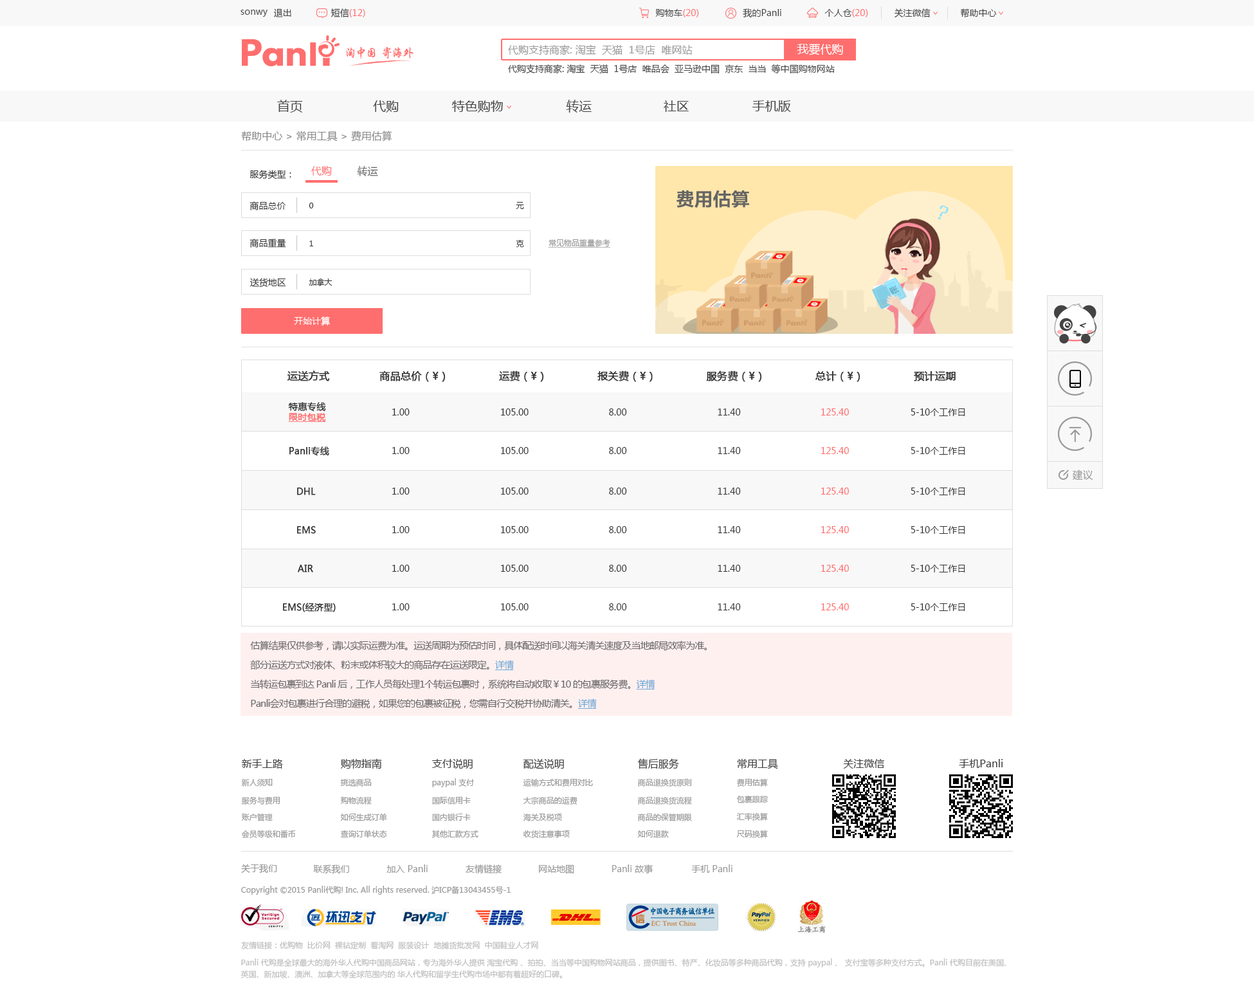
<style>
.page{position:relative;width:1254px;height:1004px;background:#ffffff}
.page>*{position:absolute;margin:0}
.t1{font:9px "MicrosoftYaHei";color:#444444}
.t2{font:9px "MicrosoftYaHei";color:#ff6e6e}
.t3{font:10.3px "MicrosoftYaHei";color:#999999}
.t4{font:11.6px "MicrosoftYaHei";color:#ffffff}
.t5{font:12.9px "MicrosoftYaHei";color:#444444}
.t6{font:10.3px "MicrosoftYaHei";color:#888888}
.t7{font:9px "MicrosoftYaHei";color:#333333}
.t8{font:10.3px "MicrosoftYaHei";color:#ff6e6e}
.t9{font:10.3px "MicrosoftYaHei";color:#666666}
.t10{font:18px "FZLTZHK--GBK1-0";color:#656565;font-weight:bold}
.t11{font:7.7px "MicrosoftYaHei";color:#333333}
.t12{font:7.7px "MicrosoftYaHei";color:#999999;text-decoration:underline}
.t13{font:9px "MicrosoftYaHei";color:#ffffff}
.t14{font:10.3px "MicrosoftYaHei";color:#333333;font-weight:bold}
.t15{font:9px/10.3px "MicrosoftYaHei";color:#333333;font-weight:bold}
.t16{font:9px/10.3px "MicrosoftYaHei";color:#ff6e6e;font-weight:bold;text-decoration:underline}
.t17{font:9px "MicrosoftYaHei";color:#333333;font-weight:bold}
.t18{font:9.6px/19.3px "MicrosoftYaHei";letter-spacing:-0.06em;color:#666666}
.t19{font:9.6px/19.3px "MicrosoftYaHei";letter-spacing:-0.06em;color:#68a6d4;text-decoration:underline}
</style>
<div class="page">
<p class="t1" style="left:240px;top:10px;width:27px;height:7px">sonwy</p>
<p class="t1" style="left:273px;top:8px;width:18px;height:9px">退出</p>
<p class="t2" style="left:330px;top:8px;width:35px;height:9px"><span class="t1">短信</span>(12)</p>
<p class="t2" style="left:655px;top:9px;width:44px;height:8px"><span class="t1">购物车</span>(20)</p>
<p class="t1" style="left:742px;top:8px;width:39px;height:10px">我的Panli</p>
<p class="t2" style="left:824px;top:9px;width:44px;height:8px"><span class="t1">个人仓</span>(20)</p>
<p class="t1" style="left:894px;top:8px;width:36px;height:9px">关注微信</p>
<p class="t1" style="left:960px;top:8px;width:36px;height:10px">帮助中心</p>
<p class="t3" style="left:508px;top:44px;width:184px;height:11px">代购支持商家: 淘宝  天猫  1号店  唯网站</p>
<p class="t4" style="left:797px;top:44px;width:46px;height:11px">我要代购</p>
<p class="t1" style="left:508px;top:64px;width:326px;height:10px">代购支持商家: 淘宝  天猫  1号店  唯品会  亚马逊中国  京东  当当  等中国购物网站</p>
<p class="t5" style="left:277px;top:100px;width:26px;height:13px">首页</p>
<p class="t5" style="left:373px;top:100px;width:26px;height:13px">代购</p>
<p class="t5" style="left:451px;top:100px;width:52px;height:13px">特色购物</p>
<p class="t5" style="left:566px;top:100px;width:25px;height:13px">转运</p>
<p class="t5" style="left:663px;top:100px;width:25px;height:12px">社区</p>
<p class="t5" style="left:752px;top:100px;width:39px;height:12px">手机版</p>
<p class="t6" style="left:241px;top:130px;width:151px;height:11px">帮助中心 &gt; 常用工具 &gt; 费用估算</p>
<p class="t7" style="left:249px;top:170px;width:42px;height:9px">服务类型：</p>
<p class="t8" style="left:311px;top:166px;width:21px;height:10px">代购</p>
<p class="t9" style="left:357px;top:166px;width:21px;height:10px">转运</p>
<p class="t10" style="left:676px;top:190px;width:73px;height:18px">费用估算</p>
<p class="t7" style="left:249px;top:201px;width:37px;height:9px">商品总价</p>
<p class="t11" style="left:309px;top:203px;width:5px;height:5px">0</p>
<p class="t11" style="left:516px;top:202px;width:8px;height:7px">元</p>
<p class="t7" style="left:249px;top:239px;width:37px;height:9px">商品重量</p>
<p class="t11" style="left:309px;top:240px;width:4px;height:6px">1</p>
<p class="t11" style="left:516px;top:239px;width:8px;height:9px">克</p>
<p class="t12" style="left:548px;top:239px;width:62px;height:9px">常见物品重量参考</p>
<p class="t7" style="left:249px;top:278px;width:37px;height:9px">送货地区</p>
<p class="t11" style="left:309px;top:278px;width:23px;height:8px">加拿大</p>
<p class="t13" style="left:294px;top:316px;width:36px;height:10px">开始计算</p>
<p class="t14" style="left:287px;top:370px;width:668px;height:12px">运送方式               商品总价（¥）               运费（¥）               报关费（¥）               服务费（¥）               总计（¥）               预计运期</p>
<p class="t15" style="left:288px;top:402px;width:38px;height:20px">特惠专线<br><span class="t16">限时包税</span></p>
<p class="t7" style="left:392px;top:408px;width:573px;height:8px">1.00                                  105.00                              8.00                                  11.40                              <span class="t2">125.40</span>                       5-10个工作日</p>
<p class="t17" style="left:289px;top:446px;width:40px;height:10px">Panli专线</p>
<p class="t7" style="left:392px;top:447px;width:573px;height:8px">1.00                                  105.00                              8.00                                  11.40                              <span class="t2">125.40  </span>                     5-10个工作日</p>
<p class="t3" style="left:1072px;top:469px;width:21px;height:11px">建议</p>
<p class="t17" style="left:297px;top:487px;width:19px;height:8px">DHL</p>
<p class="t7" style="left:392px;top:487px;width:573px;height:8px">1.00                                  105.00                              8.00                                  11.40                              <span class="t2">125.40</span>                       5-10个工作日</p>
<p class="t17" style="left:297px;top:526px;width:19px;height:8px">EMS</p>
<p class="t7" style="left:392px;top:526px;width:573px;height:8px">1.00                                  105.00                              8.00                                  11.40                              <span class="t2">125.40  </span>                     5-10个工作日</p>
<p class="t17" style="left:298px;top:564px;width:15px;height:8px">AIR</p>
<p class="t7" style="left:392px;top:564px;width:573px;height:8px">1.00                                  105.00                              8.00                                  11.40                              <span class="t2">125.40</span>                       5-10个工作日</p>
<p class="t17" style="left:283px;top:602px;width:53px;height:10px">EMS(经济型)</p>
<p class="t7" style="left:392px;top:603px;width:573px;height:8px">1.00                                  105.00                              8.00                                  11.40                              <span class="t2">125.40  </span>                     5-10个工作日</p>
<p class="t18" style="left:250px;top:640px;width:456px;height:68px">估算结果仅供参考，请以实际运费为准。运送周期为预估时间，具体配送时间以海关清关速度及当地邮局效率为准。<br>部分运送方式对液体、粉末或体积较大的商品存在运送限定。<span class="t19">详情<br></span>当转运包裹到达 Panli 后，工作人员每处理1个转运包裹时，系统将自动收取￥10 的包裹服务费。<span class="t19">详情<br></span>Panli会对包裹进行合理的避税，如果您的包裹被征税，您需自行交税并协助清关。<span class="t19">详情</span></p>
</div>
